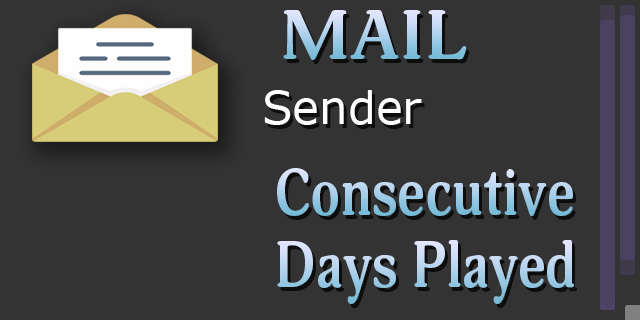
<style>
.page{position:relative;width:640px;height:320px;background:#333333}
.page>*{position:absolute;margin:0}
.t1{font:68.7px "Adonis-Bold";scale:1.09 1}
.t2{font:45.5px "Verdana";color:#ffffff}
.t3{font:65.3px "Adonis-Bold";scale:0.87 1}
.t4{font:64.4px "Adonis-Bold";scale:0.88 1}
</style>
<div class="page">
<p class="t1" style="left:283px;top:10px;width:183px;height:50px">MAIL</p>
<p class="t2" style="left:264px;top:90px;width:158px;height:35px">Sender</p>
<p class="t3" style="left:277px;top:168px;width:296px;height:48px">Consecutive</p>
<p class="t4" style="left:277px;top:240px;width:297px;height:64px">Days Played</p>
</div>
